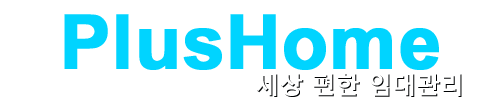
<style>
.page{position:relative;width:500px;height:100px;background:#ffffff}
.page>*{position:absolute;margin:0}
.t1{font:75px "Arial-BoldMT";color:#00d4ff;font-weight:bold}
.t2{font:24px "MalgunGothicBold"}
</style>
<div class="page">
<p class="t1" style="left:64px;top:14px;width:375px;height:56px">PlusHome</p>
<p class="t2" style="left:257px;top:74px;width:205px;height:23px">세상 편한 임대관리</p>
</div>
